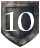
<style>
.page{position:relative;width:40px;height:48px;background:#ffffff}
.page>*{position:absolute;margin:0}
.t1{font:26.7px "CharlemagneStd-Bold";color:#ffffff}
</style>
<div class="page">
<p class="t1" style="left:5px;top:11px;width:29px;height:20px">10</p>
</div>
